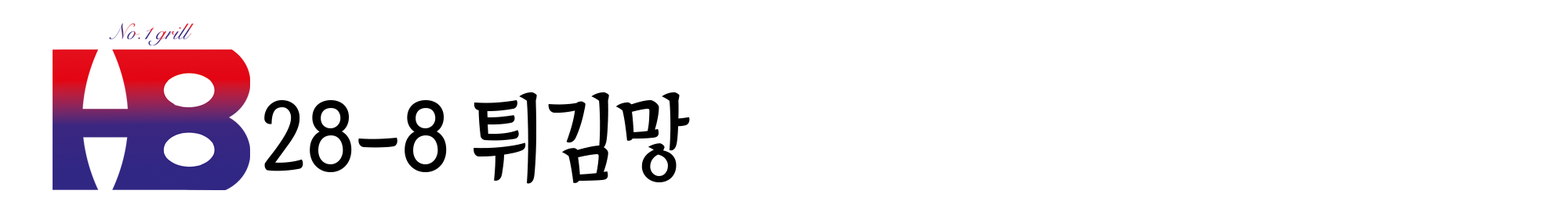
<style>
.page{position:relative;width:1568px;height:205px;background:#ffffff}
.page>*{position:absolute;margin:0}
.t1{font:93.7px "TheIndependenceHallofKorea-Regular";color:#000000;scale:0.89 1}
</style>
<div class="page">
<p class="t1" style="left:264px;top:93px;width:426px;height:91px">28-8 튀김망</p>
</div>
